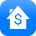
<style>
.page{position:relative;width:36px;height:36px;background:#007aff}
.page>*{position:absolute;margin:0}
.t1{font:14.1px "Roboto-Regular";color:#007aff;scale:1.15 1}
</style>
<div class="page">
<p class="t1" style="left:14px;top:12px;width:8px;height:14px">$</p>
</div>
